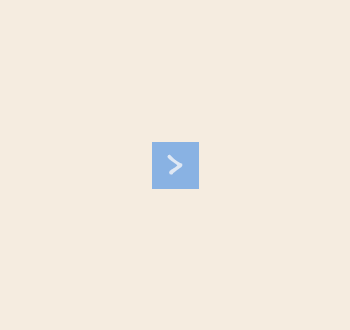
<style>
.page{position:relative;width:350px;height:330px;background:#f5ece0}
.page>*{position:absolute;margin:0}
.t1{font:30px "ASafePlacetoFall";letter-spacing:0.1em;color:#f7f8fa;font-weight:bold}
</style>
<div class="page">
<p class="t1" style="left:167px;top:154px;width:16px;height:21px;opacity:0.75">&gt;</p>
</div>
